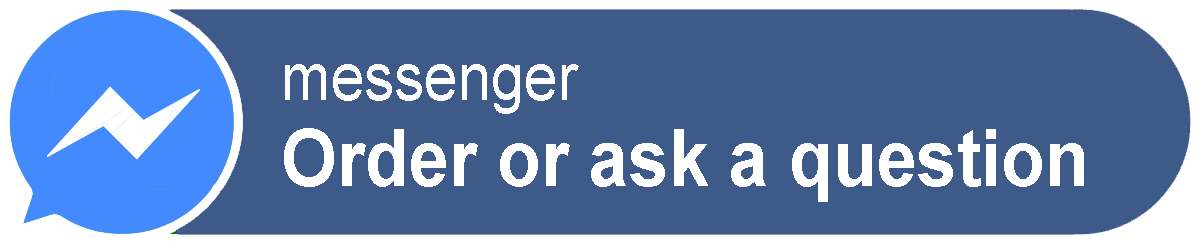
<style>
.page{position:relative;width:1200px;height:244px;background:#3e5a89}
.page>*{position:absolute;margin:0}
.t1{font:79.2px "Arial-BoldMT";color:#ffffff;scale:0.91 1}
.t2{font:66px "ArialMT";color:#ffffff;scale:0.91 1}
</style>
<div class="page">
<p class="t1" style="left:284px;top:64px;width:800px;height:138px"><span class="t2">messenger<br></span>Order or ask a question</p>
</div>
